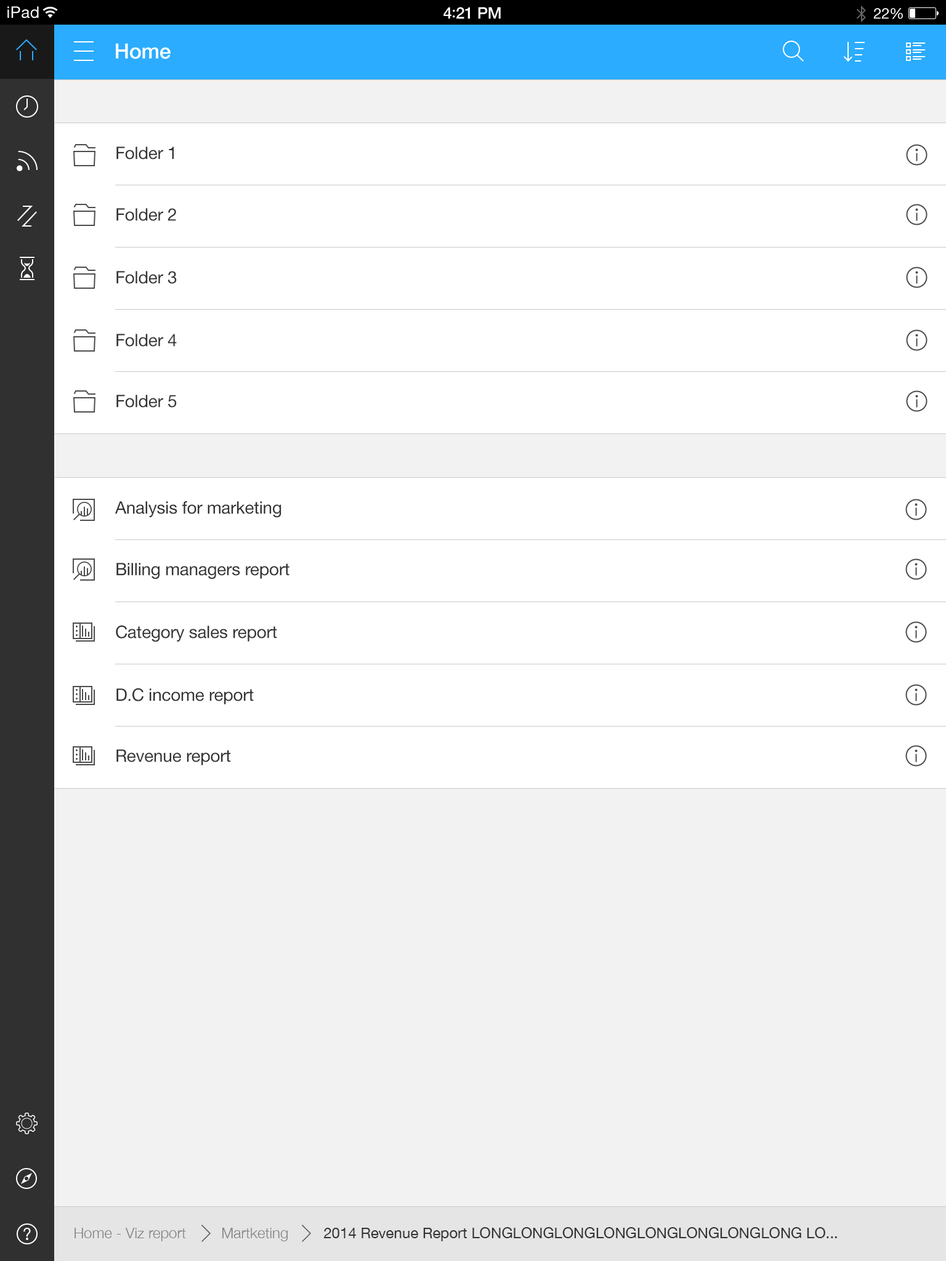
<style>
.page{position:relative;width:946px;height:1261px;background:#ffffff}
.page>*{position:absolute;margin:0}
.t1{font:16px "HelveticaNeue";letter-spacing:0.02em;color:#ffffff}
.t2{font:16px "HelveticaNeue-Medium";letter-spacing:-0.02em;color:#ffffff}
.t3{font:16px "Avenir-Medium";letter-spacing:-0.02em;color:#ffffff}
.t4{font:14.8px "HelveticaNeue";letter-spacing:-0.02em;color:#ffffff}
.t5{font:20.9px "HelveticaNeue-Medium";letter-spacing:-0.01em;color:#ffffff}
.t6{font:17.2px "HelveticaNeue";letter-spacing:-0.01em;color:#333333}
.t7{font:14.8px "HelveticaNeue-Light";color:#828282}
.t8{font:14.8px "HelveticaNeue";color:#333333}
</style>
<div class="page">
<p class="t1" style="left:7px;top:6px;width:32px;height:12px">iPad</p>
<p class="t2" style="left:443px;top:7px;width:58px;height:12px">4<span class="t3">:</span>21 PM</p>
<p class="t4" style="left:873px;top:8px;width:30px;height:11px">22%</p>
<p class="t5" style="left:116px;top:43px;width:55px;height:16px">Home</p>
<p class="t6" style="left:116px;top:147px;width:58px;height:12px">Folder 1</p>
<p class="t6" style="left:116px;top:208px;width:60px;height:13px">Folder 2</p>
<p class="t6" style="left:116px;top:271px;width:61px;height:13px">Folder 3</p>
<p class="t6" style="left:116px;top:334px;width:61px;height:13px">Folder 4</p>
<p class="t6" style="left:116px;top:395px;width:61px;height:13px">Folder 5</p>
<p class="t6" style="left:115px;top:501px;width:166px;height:17px">Analysis for marketing</p>
<p class="t6" style="left:116px;top:563px;width:173px;height:16px">Billing managers report</p>
<p class="t6" style="left:116px;top:625px;width:161px;height:17px">Category sales report</p>
<p class="t6" style="left:116px;top:688px;width:138px;height:16px">D.C income report</p>
<p class="t6" style="left:116px;top:749px;width:115px;height:16px">Revenue report</p>
<p class="t7" style="left:74px;top:1228px;width:112px;height:13px">Home - Viz report</p>
<p class="t7" style="left:222px;top:1228px;width:66px;height:13px">Martketing</p>
<p class="t8" style="left:324px;top:1227px;width:513px;height:14px">2014 Revenue Report LONGLONGLONGLONGLONGLONGLONGLONG LO...</p>
</div>
